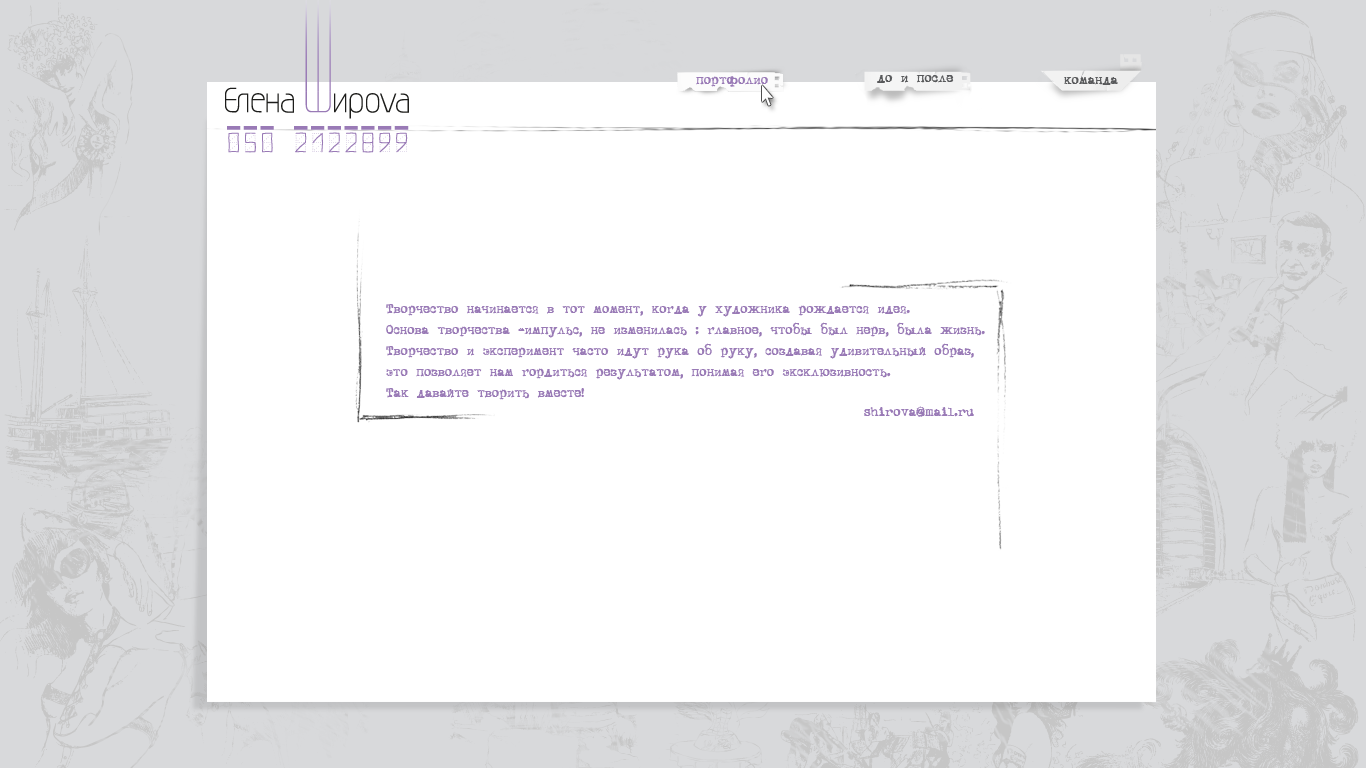
<style>
.page{position:relative;width:1366px;height:768px;background:#ffffff}
.page>*{position:absolute;margin:0}
.t1{font:14px "DSVTCoronaCyr";color:#997ab6}
.t2{font:14px "DSVTCoronaCyr";color:#58595b}
.t3{font:14px/21px "DSVTCoronaCyr";color:#997ab6}
</style>
<div class="page">
<p class="t1" style="left:696px;top:76px;width:72px;height:11px">портфолио</p>
<p class="t1" style="left:696px;top:76px;width:72px;height:11px">портфолио</p>
<p class="t2" style="left:877px;top:75px;width:77px;height:8px">до и после</p>
<p class="t2" style="left:1064px;top:77px;width:54px;height:8px">команда</p>
<p class="t3" style="left:386px;top:304px;width:599px;height:96px">Творчество начинается в тот момент, когда у художника рождается идея. <br>Основа творчества -импульс, не изменилась : главное, чтобы был нерв, была жизнь. <br>Творчество и эксперимент часто идут рука об руку, создавая удивительный образ, <br>это позволяет нам гордиться результатом, понимая его эксклюзивность. <br>Так давайте творить вместе!</p>
<p class="t1" style="left:864px;top:406px;width:110px;height:11px">shirova@mail.ru</p>
</div>
